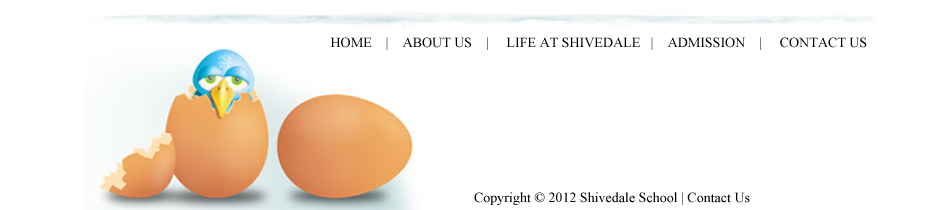
<style>
.page{position:relative;width:946px;height:210px;background:#ffffff}
.page>*{position:absolute;margin:0}
.t1{font:14px "TimesNewRomanPSMT";color:#000000}
</style>
<div class="page">
<p class="t1" style="left:330px;top:37px;width:537px;height:13px">HOME    |    ABOUT US    |     LIFE AT SHIVEDALE   |    ADMISSION    |     CONTACT US</p>
<p class="t1" style="left:474px;top:192px;width:276px;height:13px">Copyright © 2012 Shivedale School | Contact Us</p>
</div>
